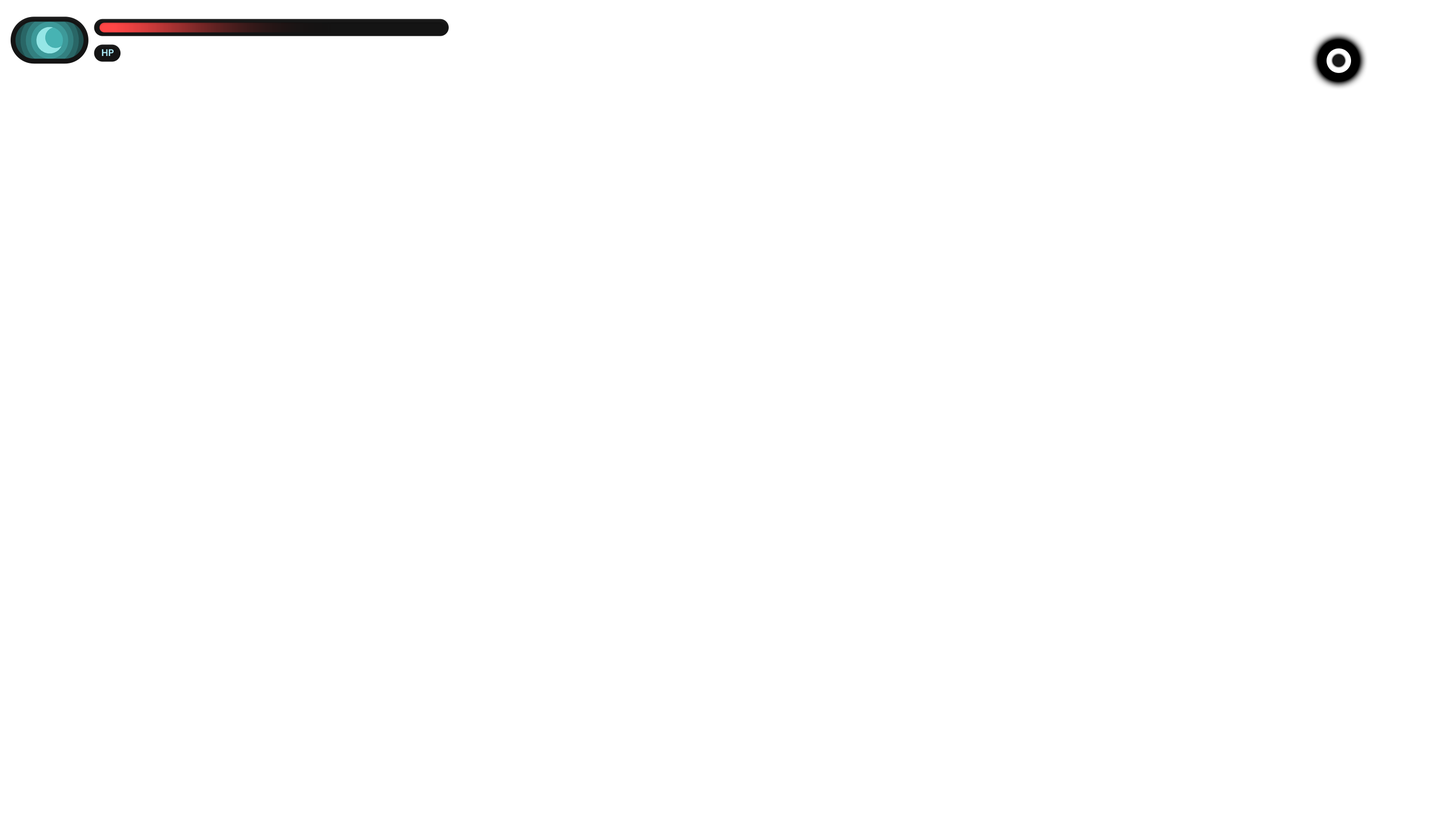
<style>
.page{position:relative;width:1456px;height:819px;background:#ffffff}
.page>*{position:absolute;margin:0}
.t1{font:9.6px "Poppins-Medium";color:#b2f2ff}
</style>
<div class="page">
<p class="t1" style="left:102px;top:49px;width:12px;height:7px">HP</p>
</div>
